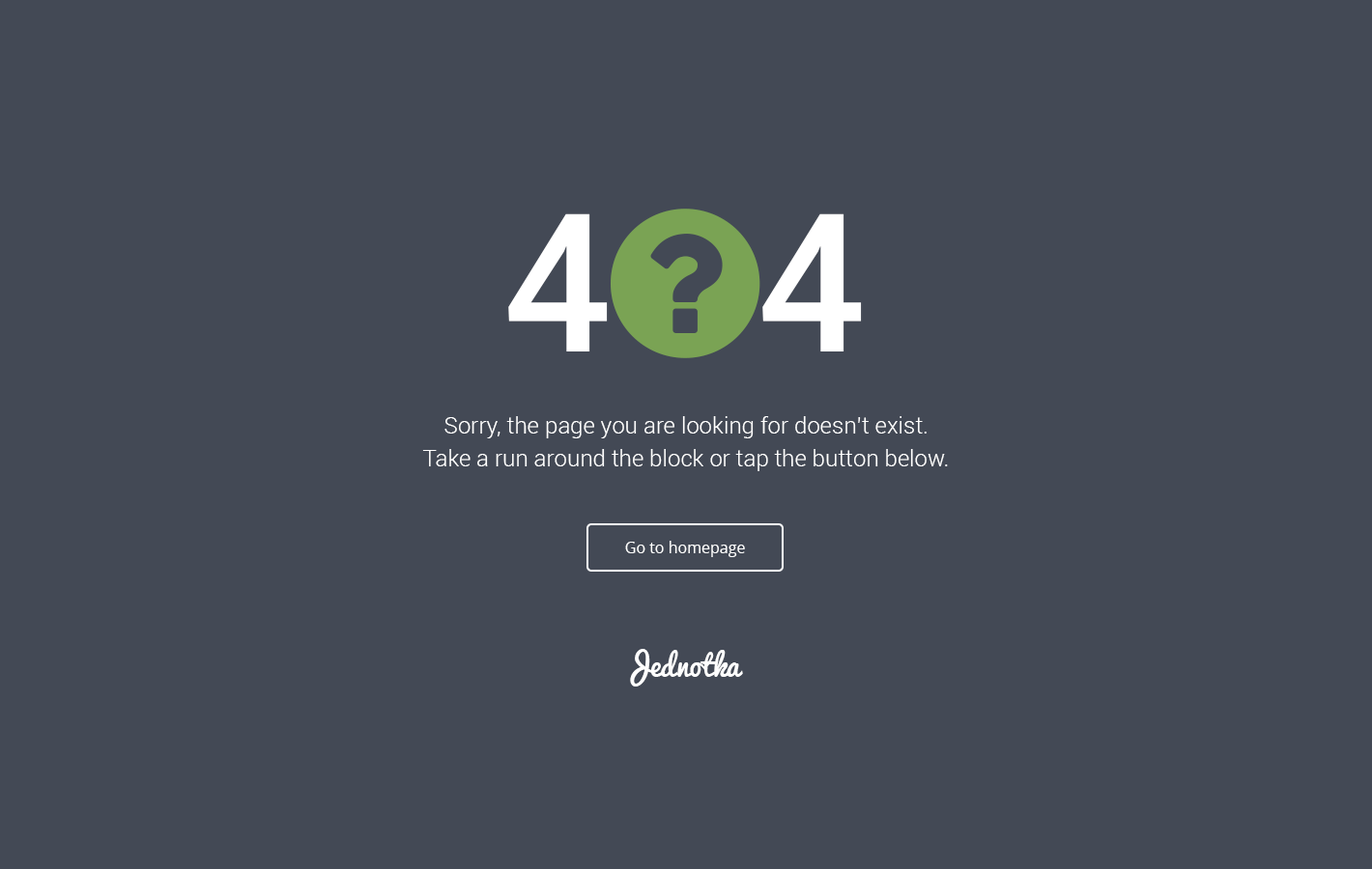
<style>
.page{position:relative;width:1372px;height:869px;background:#434955}
.page>*{position:absolute;margin:0}
.t1{font:193.2px "Roboto-Medium";color:#ffffff;text-transform:uppercase}
.t2{font:23.2px/32.8px "Roboto-Light";color:#ffffff}
.t3{font:15.5px "OpenSans";color:#ffffff}
.t4{font:29px "Pacifico";color:#ffffff}
</style>
<div class="page">
<p class="t1" style="left:508px;top:213px;width:354px;height:139px">4   4</p>
<p class="t2" style="left:422px;top:416px;width:526px;height:55px;text-align:center">Sorry, the page you are looking for doesn’t exist.<br>Take a run around the block or tap the button below.</p>
<p class="t3" style="left:625px;top:541px;width:120px;height:16px">Go to homepage</p>
<p class="t4" style="left:630px;top:649px;width:113px;height:38px">Jednotka</p>
</div>
